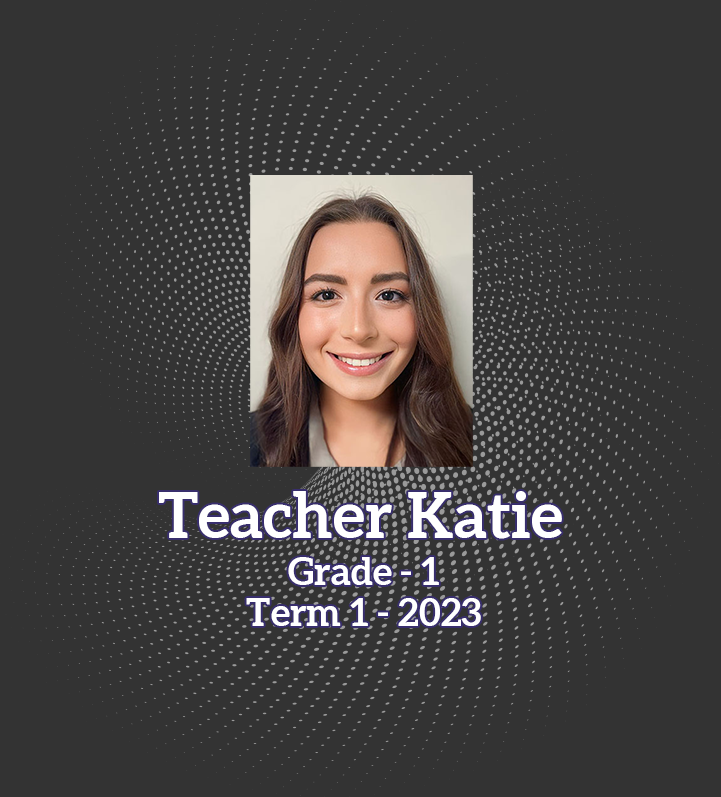
<style>
.page{position:relative;width:721px;height:797px;background:#333333}
.page>*{position:absolute;margin:0}
.t1{font:63.7px "Aleo-Bold";color:#ffffff}
.t2{font:38.2px/40.8px "Aleo-Bold";color:#ffffff}
</style>
<div class="page">
<p class="t1" style="left:159px;top:491px;width:403px;height:48px">Teacher Katie</p>
<p class="t2" style="left:246px;top:557px;width:235px;height:69px;text-align:center">Grade - 1<br>Term 1 - 2023</p>
</div>
